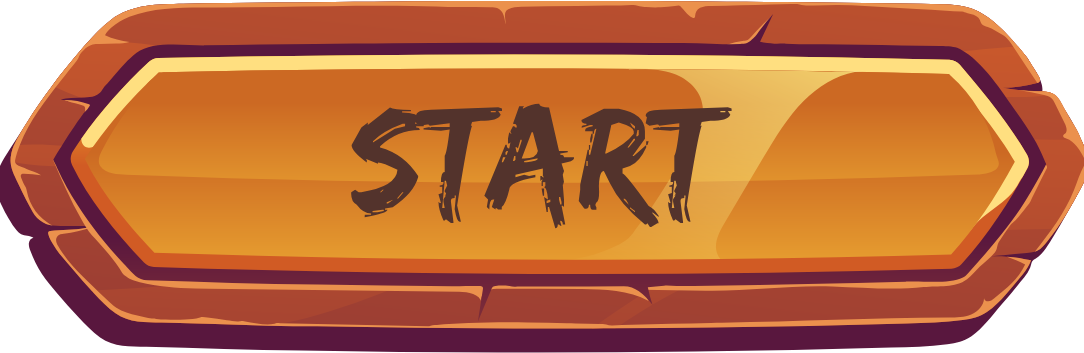
<style>
.page{position:relative;width:1084px;height:353px}
.page>*{position:absolute;margin:0}
.t1{font:150px "Edo";color:#53332c}
</style>
<div class="page">
<p class="t1" style="left:351px;top:103px;width:381px;height:126px">start</p>
</div>
